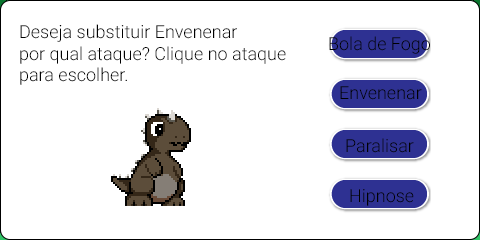
<style>
.page{position:relative;width:480px;height:240px;background:#ffffff}
.page>*{position:absolute;margin:0}
.t1{font:18px "Roboto-Light";color:#000000}
</style>
<div class="page">
<p class="t1" style="left:20px;top:24px;width:266px;height:61px">Deseja substituir Envenenar<br>por qual ataque? Clique no ataque<br>para escolher.</p>
<p class="t1" style="left:329px;top:36px;width:101px;height:18px">Bola de Fogo</p>
<p class="t1" style="left:340px;top:86px;width:82px;height:14px">Envenenar</p>
<p class="t1" style="left:346px;top:138px;width:68px;height:15px">Paralisar</p>
<p class="t1" style="left:350px;top:189px;width:64px;height:17px">Hipnose</p>
</div>
